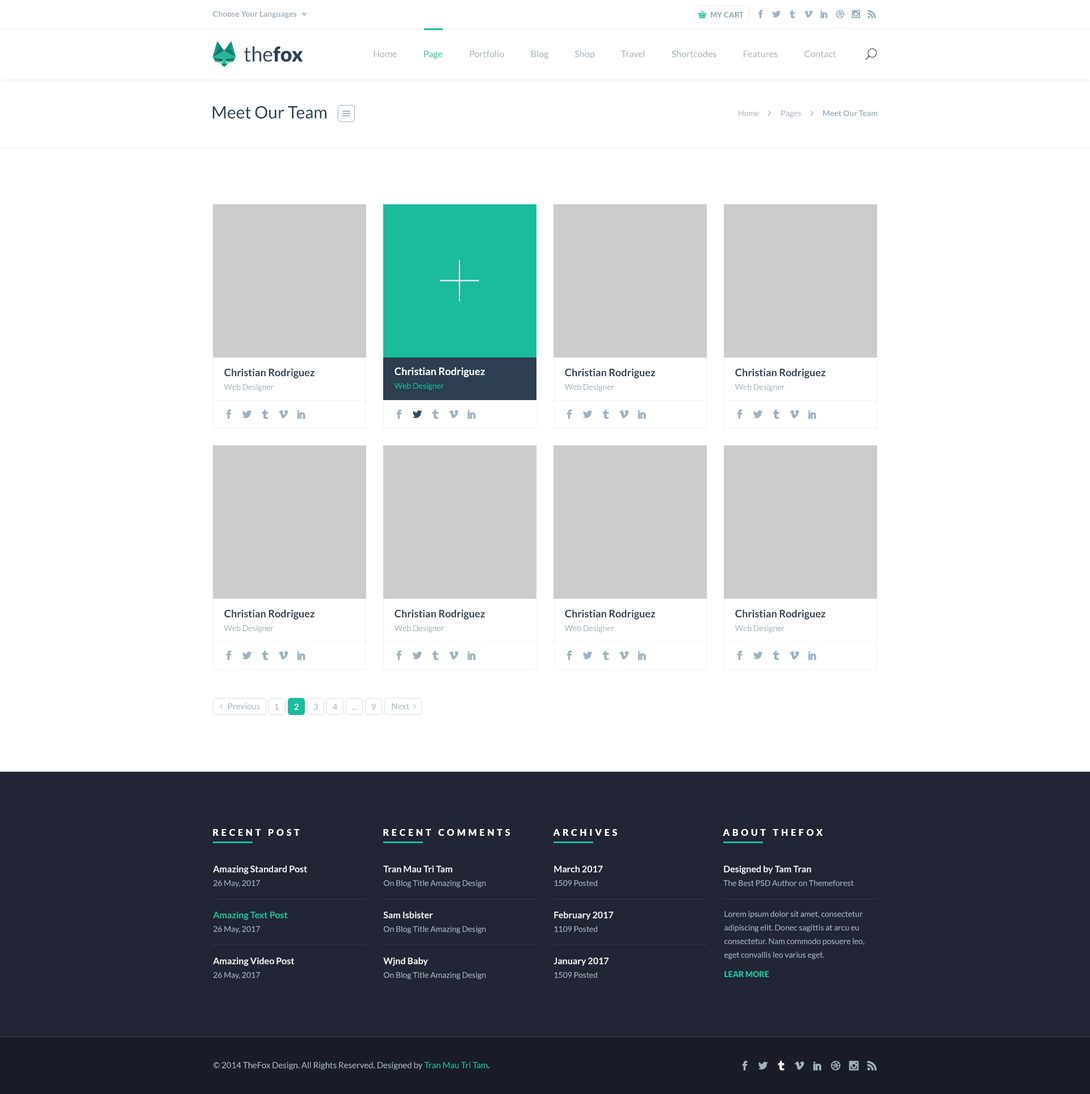
<style>
.page{position:relative;width:1090px;height:1094px;background:#ffffff}
.page>*{position:absolute;margin:0}
.t1{font:7.9px "Lato-Bold";color:#a1b1bc}
.t2{font:7.4px "Lato-Black";color:#a1b1bc;text-transform:uppercase}
.t3{font:20.4px "Lato-Regular";color:#34495e}
.t4{font:20.4px "Lato-Black";color:#2c3e50}
.t5{font:9.1px "Lato-Regular";color:#a1b1bc}
.t6{font:9.1px "Lato-Regular";color:#1abc9c}
.t7{font:17px "Lato-Regular";color:#2c3e50}
.t8{font:7.9px "Lato-Regular";color:#a1b1bc}
.t9{font:85.1px "Lato-Hairline";color:#ffffff}
.t10{font:10.2px/13.6px "Lato-Bold";color:#2c3e50}
.t11{font:7.9px/13.6px "Lato-Regular";color:#a1b1bc}
.t12{font:10.2px/13.6px "Lato-Bold";color:#ffffff}
.t13{font:7.9px/13.6px "Lato-Regular";color:#1abc9c}
.t14{font:8.5px "Lato-Regular";color:#a1b1bc}
.t15{font:8.5px "Lato-Regular";color:#ffffff}
.t16{font:9.1px "Lato-Black";letter-spacing:0.3em;color:#ffffff}
.t17{font:9.1px/13.6px "Lato-Bold";color:#ecf0f1}
.t18{font:9.1px/13.6px "Lato-Bold";color:#1abc9c}
.t19{font:7.9px "Lato-Black";color:#1abc9c}
.t20{font:8.5px "Lato-Regular";color:#1abc9c}
</style>
<div class="page">
<p class="t1" style="left:213px;top:11px;width:84px;height:7px">Choose Your Languages</p>
<p class="t2" style="left:710px;top:12px;width:34px;height:6px">my cart</p>
<p class="t3" style="left:243px;top:46px;width:60px;height:16px">the<span class="t4">fox</span></p>
<p class="t5" style="left:373px;top:51px;width:463px;height:8px">Home               <span class="t6">Page</span>               Portfolio               Blog               Shop               Travel               Shortcodes               Features               Contact</p>
<p class="t7" style="left:212px;top:106px;width:114px;height:13px">Meet Our Team</p>
<p class="t8" style="left:738px;top:110px;width:139px;height:7px">Home              Pages              <span class="t1">Meet Our Team</span></p>
<p class="t9" style="left:439px;top:260px;width:40px;height:41px">+</p>
<p class="t10" style="left:224px;top:368px;width:90px;height:24px">Christian Rodriguez<br><span class="t11">Web Designer</span></p>
<p class="t12" style="left:394px;top:367px;width:91px;height:23px">Christian Rodriguez<br><span class="t13">Web Designer</span></p>
<p class="t10" style="left:565px;top:368px;width:90px;height:24px">Christian Rodriguez<br><span class="t11">Web Designer</span></p>
<p class="t10" style="left:735px;top:368px;width:90px;height:24px">Christian Rodriguez<br><span class="t11">Web Designer</span></p>
<p class="t10" style="left:224px;top:610px;width:90px;height:23px">Christian Rodriguez<br><span class="t11">Web Designer</span></p>
<p class="t10" style="left:394px;top:610px;width:91px;height:23px">Christian Rodriguez<br><span class="t11">Web Designer</span></p>
<p class="t10" style="left:565px;top:610px;width:90px;height:23px">Christian Rodriguez<br><span class="t11">Web Designer</span></p>
<p class="t10" style="left:735px;top:610px;width:90px;height:23px">Christian Rodriguez<br><span class="t11">Web Designer</span></p>
<p class="t14" style="left:228px;top:703px;width:32px;height:6px">Previous</p>
<p class="t14" style="left:275px;top:704px;width:4px;height:6px">1</p>
<p class="t15" style="left:294px;top:704px;width:5px;height:6px">2</p>
<p class="t14" style="left:313px;top:704px;width:5px;height:6px">3</p>
<p class="t14" style="left:333px;top:704px;width:5px;height:6px">4</p>
<p class="t14" style="left:352px;top:709px;width:5px;height:1px">...</p>
<p class="t14" style="left:371px;top:704px;width:5px;height:6px">9</p>
<p class="t14" style="left:392px;top:703px;width:17px;height:6px">Next</p>
<p class="t16" style="left:213px;top:829px;width:87px;height:7px">RECENT POST</p>
<p class="t16" style="left:383px;top:829px;width:127px;height:7px">RECENT COMMENTS</p>
<p class="t16" style="left:553px;top:829px;width:64px;height:7px">ARCHIVES</p>
<p class="t16" style="left:723px;top:829px;width:99px;height:7px">ABOUT THEFOX</p>
<p class="t17" style="left:213px;top:866px;width:94px;height:22px">Amazing Standard Post<br><span class="t11">26 May, 2017</span></p>
<p class="t11" style="left:383px;top:866px;width:103px;height:22px"><span class="t17">Tran Mau Tri Tam<br></span>On Blog Title Amazing Design</p>
<p class="t11" style="left:554px;top:866px;width:49px;height:21px"><span class="t17">March 2017<br></span>1509 Posted</p>
<p class="t11" style="left:723px;top:866px;width:131px;height:21px"><span class="t17">Designed by Tam Tran<br></span>The Best PSD Author on Themeforest</p>
<p class="t18" style="left:213px;top:912px;width:75px;height:22px">Amazing Text Post<br><span class="t11">26 May, 2017</span></p>
<p class="t11" style="left:383px;top:912px;width:103px;height:22px"><span class="t17">Sam Isbister<br></span>On Blog Title Amazing Design</p>
<p class="t17" style="left:554px;top:912px;width:60px;height:21px">February 2017<br><span class="t11">1109 Posted</span></p>
<p class="t11" style="left:724px;top:911px;width:140px;height:49px">Lorem ipsum dolor sit amet, consectetur adipiscing elit. Donec sagittis at arcu eu consectetur. Nam commodo posuere leo, eget convallis leo varius eget.</p>
<p class="t17" style="left:213px;top:957px;width:81px;height:23px">Amazing Video Post<br><span class="t11">26 May, 2017</span></p>
<p class="t11" style="left:383px;top:957px;width:103px;height:23px"><span class="t17">Wjnd Baby<br></span>On Blog Title Amazing Design</p>
<p class="t17" style="left:553px;top:957px;width:55px;height:21px">January 2017<br><span class="t11">1509 Posted</span></p>
<p class="t19" style="left:724px;top:971px;width:45px;height:6px">LEAR MORE</p>
<p class="t14" style="left:213px;top:1062px;width:276px;height:8px">© 2014 TheFox Design. All Rights Reserved. Designed by <span class="t20">Tran Mau Tri Tam</span>.</p>
</div>
